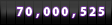
<style>
.page{position:relative;width:112px;height:25px}
.page>*{position:absolute;margin:0}
.t1{font:12px "KozGoPro-Heavy";color:#ffffff}
</style>
<div class="page">
<p class="t1" style="left:17px;top:7px;width:6px;height:9px">7</p>
<p class="t1" style="left:25px;top:7px;width:7px;height:9px">0</p>
<p class="t1" style="left:36px;top:13px;width:4px;height:5px">,</p>
<p class="t1" style="left:43px;top:7px;width:7px;height:9px">0</p>
<p class="t1" style="left:52px;top:7px;width:7px;height:9px">0</p>
<p class="t1" style="left:61px;top:7px;width:7px;height:9px">0</p>
<p class="t1" style="left:72px;top:13px;width:4px;height:5px">,</p>
<p class="t1" style="left:80px;top:7px;width:7px;height:9px">5</p>
<p class="t1" style="left:89px;top:7px;width:7px;height:9px">2</p>
<p class="t1" style="left:98px;top:7px;width:7px;height:9px">5</p>
</div>
